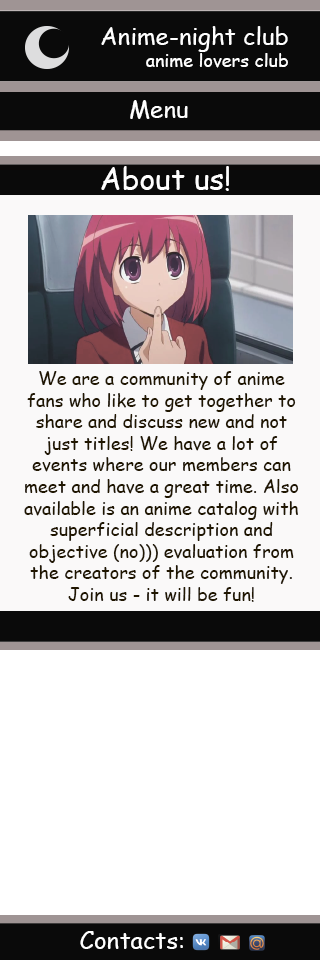
<style>
.page{position:relative;width:320px;height:960px;background:#ffffff}
.page>*{position:absolute;margin:0}
.t1{font:24px "ComicSansMS";color:#ffffff}
.t2{font:18px "ComicSansMS";color:#ffffff}
.t3{font:30px "ComicSansMS";color:#ffffff}
.t4{font:18px "ComicSansMS";color:#201600}
</style>
<div class="page">
<p class="t1" style="left:101px;top:26px;width:187px;height:26px">Anime-night club</p>
<p class="t2" style="left:146px;top:53px;width:142px;height:15px">anime lovers club</p>
<p class="t1" style="left:130px;top:100px;width:58px;height:19px">Menu</p>
<p class="t3" style="left:101px;top:166px;width:128px;height:25px">About us!</p>
<p class="t4" style="left:24px;top:371px;width:275px;height:231px;text-align:center">We are a community of anime fans who like to get together to share and discuss new and not just titles! We have a lot of events where our members can meet and have a great time. Also available is an anime catalog with superficial description and objective (no))) evaluation from the creators of the community. Join us - it will be fun!</p>
<p class="t1" style="left:80px;top:931px;width:103px;height:18px">Contacts:</p>
</div>
